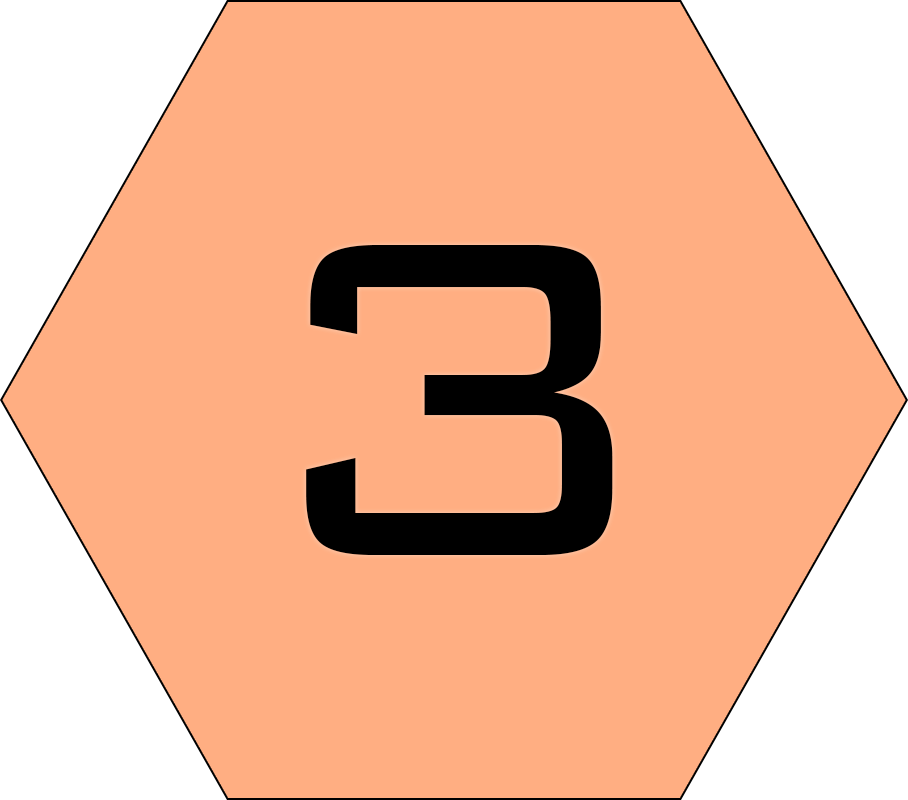
<style>
.page{position:relative;width:908px;height:800px;background:#ffae82}
.page>*{position:absolute;margin:0}
.t1{font:600px "BankGothicBT-Light";color:#000000}
</style>
<div class="page">
<p class="t1" style="left:306px;top:245px;width:307px;height:310px">3</p>
</div>
